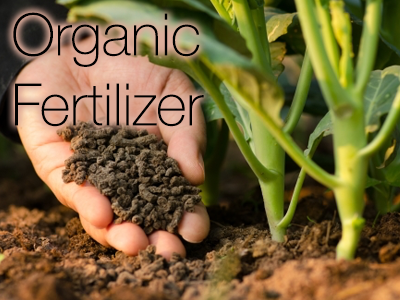
<style>
.page{position:relative;width:400px;height:300px}
.page>*{position:absolute;margin:0}
.t1{font:58.3px "HelveticaNeue-Thin";color:#000000}
</style>
<div class="page">
<p class="t1" style="left:13px;top:12px;width:191px;height:115px">Organic<br>Fertilizer</p>
</div>
